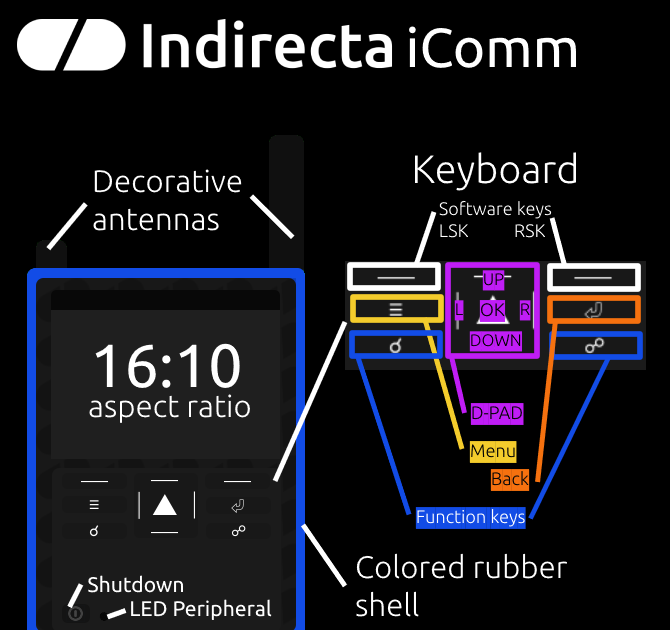
<style>
.page{position:relative;width:670px;height:630px;background:#000000}
.page>*{position:absolute;margin:0}
.t1{font:55.1px "Ubuntu-Regular";color:#ffffff}
.t2{font:39.6px "Ubuntu-Light";color:#ffffff}
.t3{font:31.3px "Ubuntu-Light";color:#ffffff}
.t4{font:18.1px "Ubuntu-Light";color:#ffffff}
.t5{font:16.7px "Ubuntu-Light";color:#c01df6}
.t6{font:18.1px "Ubuntu-Light";color:#c01df6}
.t7{font:16.7px "Ubuntu-Light"}
.t8{font:61px "Ubuntu-Regular";color:#ffffff}
.t9{font:18.1px "Ubuntu-Light";color:#f4cc2c}
.t10{font:18.1px "Ubuntu-Light";color:#f5710f}
.t11{font:18.1px "Ubuntu-Light";color:#124ce6}
.t12{font:21.2px "Ubuntu-Regular";color:#ffffff}
</style>
<div class="page">
<p class="t1" style="left:409px;top:26px;width:167px;height:42px">iComm</p>
<p class="t2" style="left:415px;top:152px;width:161px;height:39px">Keyboard</p>
<p class="t3" style="left:93px;top:169px;width:149px;height:62px">Decorative<br>antennas</p>
<p class="t4" style="left:439px;top:200px;width:113px;height:38px">Software keys<br>LSK           RSK</p>
<p class="t5" style="left:482px;top:270px;width:23px;height:21px">UP</p>
<p class="t5" style="left:454px;top:300px;width:10px;height:21px">L</p>
<p class="t6" style="left:479px;top:300px;width:27px;height:22px">OK</p>
<p class="t7" style="left:519px;top:300px;width:12px;height:21px">R</p>
<p class="t5" style="left:469px;top:331px;width:53px;height:21px">DOWN</p>
<p class="t8" style="left:95px;top:343px;width:145px;height:45px">16:10</p>
<p class="t3" style="left:89px;top:394px;width:161px;height:29px">aspect ratio</p>
<p class="t6" style="left:470px;top:403px;width:54px;height:22px">D-PAD</p>
<p class="t9" style="left:469px;top:441px;width:48px;height:22px">Menu</p>
<p class="t10" style="left:490px;top:469px;width:40px;height:22px">Back</p>
<p class="t11" style="left:415px;top:507px;width:111px;height:22px">Function keys</p>
<p class="t3" style="left:356px;top:553px;width:212px;height:64px">Colored rubber<br>shell</p>
<p class="t12" style="left:88px;top:575px;width:95px;height:18px">Shutdown</p>
<p class="t12" style="left:131px;top:599px;width:141px;height:21px">LED Peripheral</p>
</div>
